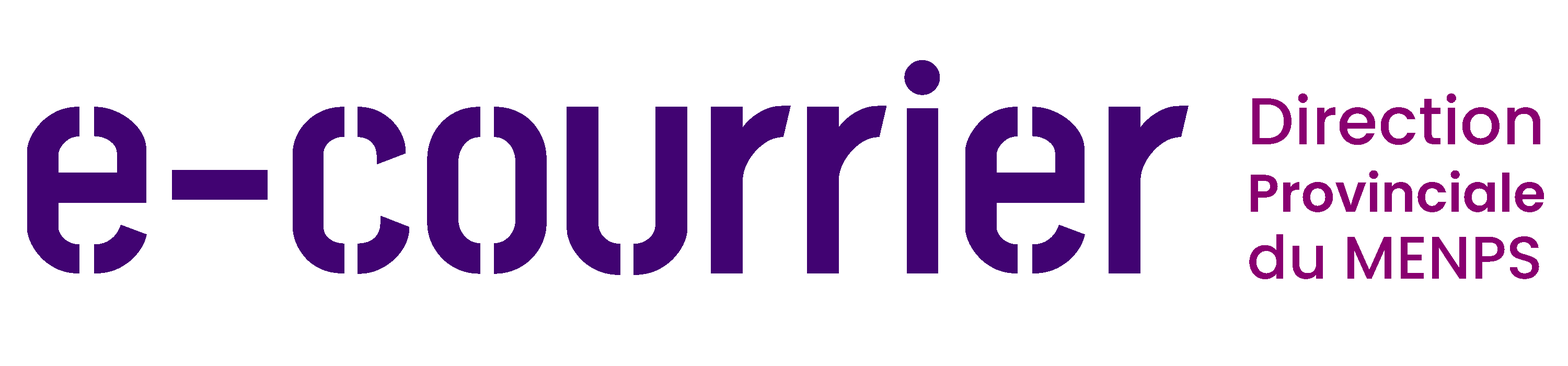
<style>
.page{position:relative;width:1568px;height:366px;background:#ffffff}
.page>*{position:absolute;margin:0}
.t1{font:300.9px "StickNoBills-SemiBold";color:#410372}
.t2{font:52.9px/67.4px "Poppins-SemiBold";color:#890070}
.t3{font:66.2px/67.4px "Poppins-Medium";color:#890070}
.t4{font:60.2px/67.4px "Poppins-Medium";color:#890070}
</style>
<div class="page">
<p class="t1" style="left:27px;top:60px;width:1162px;height:215px">e-courrier</p>
<p class="t2" style="left:1249px;top:93px;width:295px;height:186px;text-align:right"><span class="t3">Direction <br></span>Provinciale<br><span class="t4">du MENPS</span></p>
</div>
